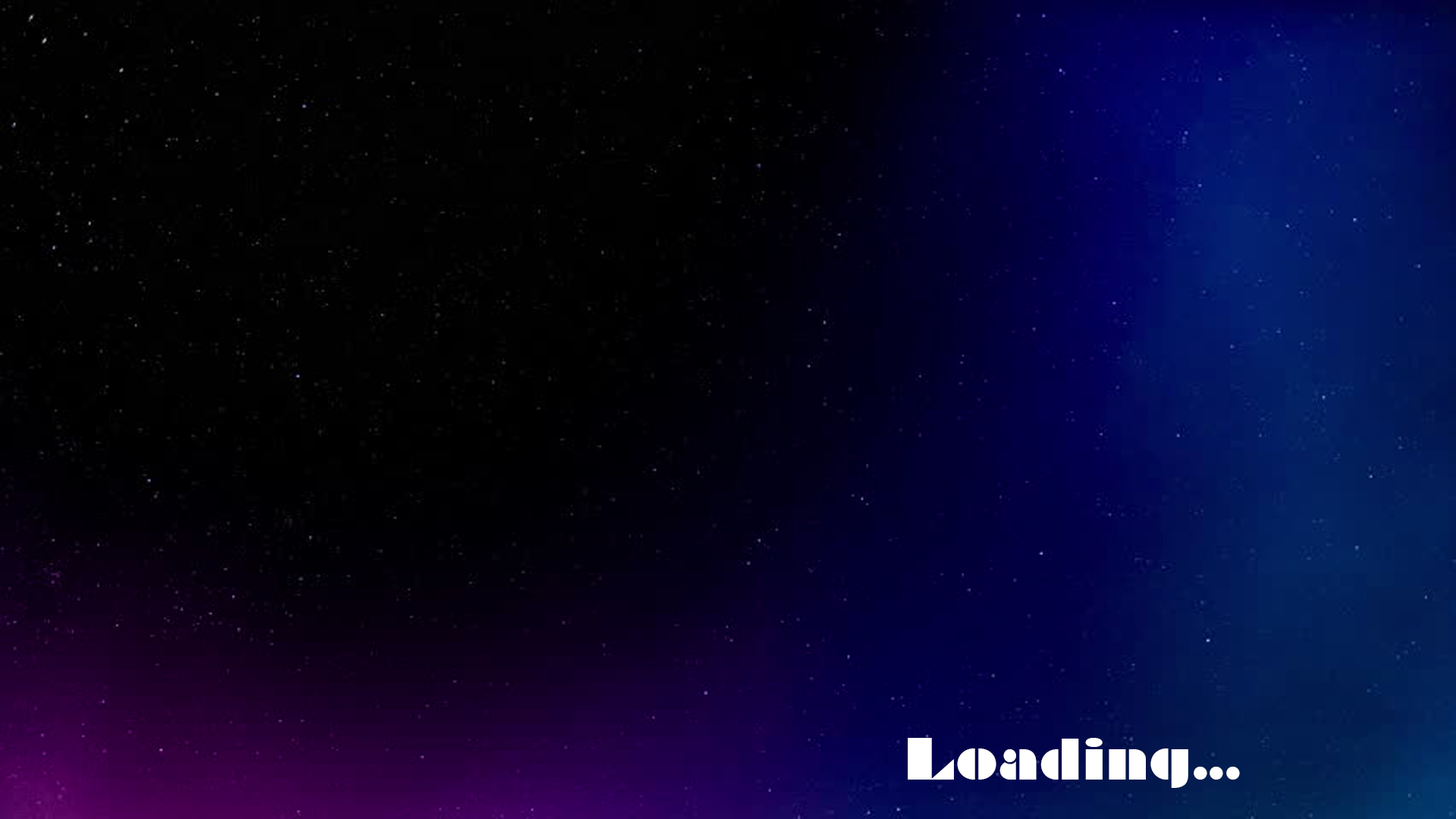
<style>
.page{position:relative;width:1456px;height:819px}
.page>*{position:absolute;margin:0}
.t1{font:93px "Braggadocio";letter-spacing:0.01em;color:#ffffff}
</style>
<div class="page">
<p class="t1" style="left:908px;top:738px;width:332px;height:50px">Loading...</p>
</div>
